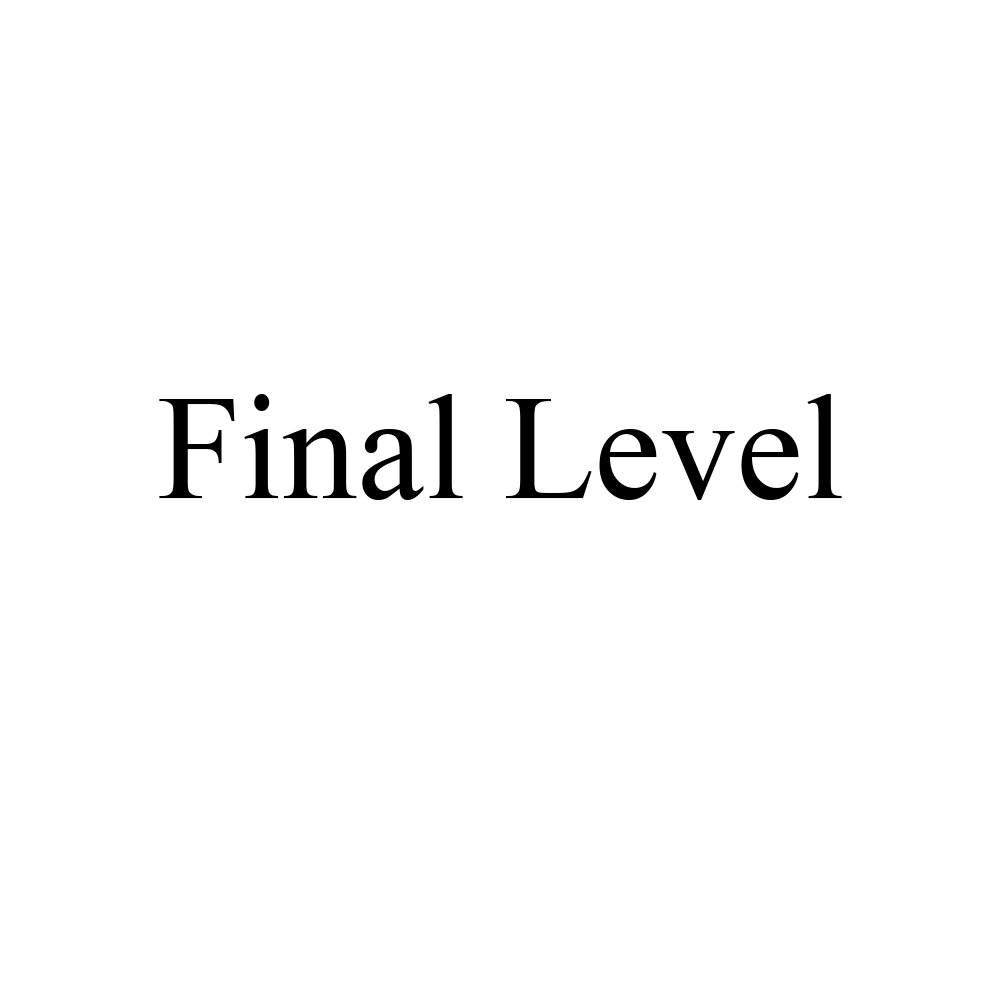
<style>
.page{position:relative;width:1000px;height:1000px;background:#ffffff}
.page>*{position:absolute;margin:0}
.t1{font:150px "TimesNewRomanPSMT";color:#000000}
</style>
<div class="page">
<p class="t1" style="left:159px;top:394px;width:683px;height:106px">Final Level</p>
</div>
